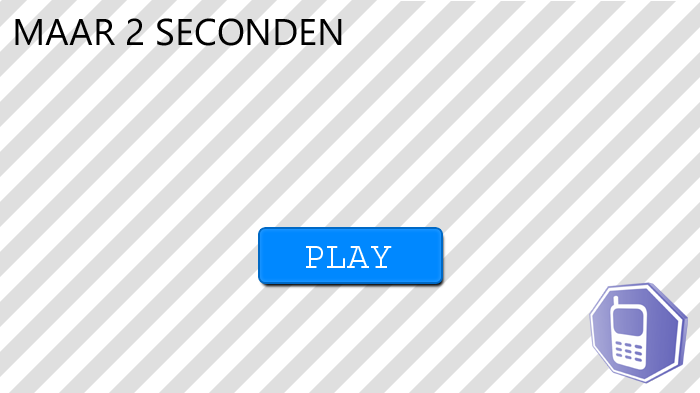
<style>
.page{position:relative;width:700px;height:393px;background:#ffffff}
.page>*{position:absolute;margin:0}
.t1{font:37px "Gadugi";color:#000000}
</style>
<div class="page">
<p class="t1" style="left:15px;top:18px;width:327px;height:28px">MAAR 2 SECONDEN</p>
</div>
